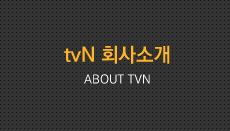
<style>
.page{position:relative;width:230px;height:131px;background:#333333}
.page>*{position:absolute;margin:0}
.t1{font:20px "KoPubDotumBold";color:#ffb423}
.t2{font:12px "KoPubDotumMedium";color:#ffffff}
</style>
<div class="page">
<p class="t1" style="left:64px;top:45px;width:106px;height:19px">tvN 회사소개</p>
<p class="t2" style="left:84px;top:74px;width:66px;height:10px">ABOUT TVN</p>
</div>
